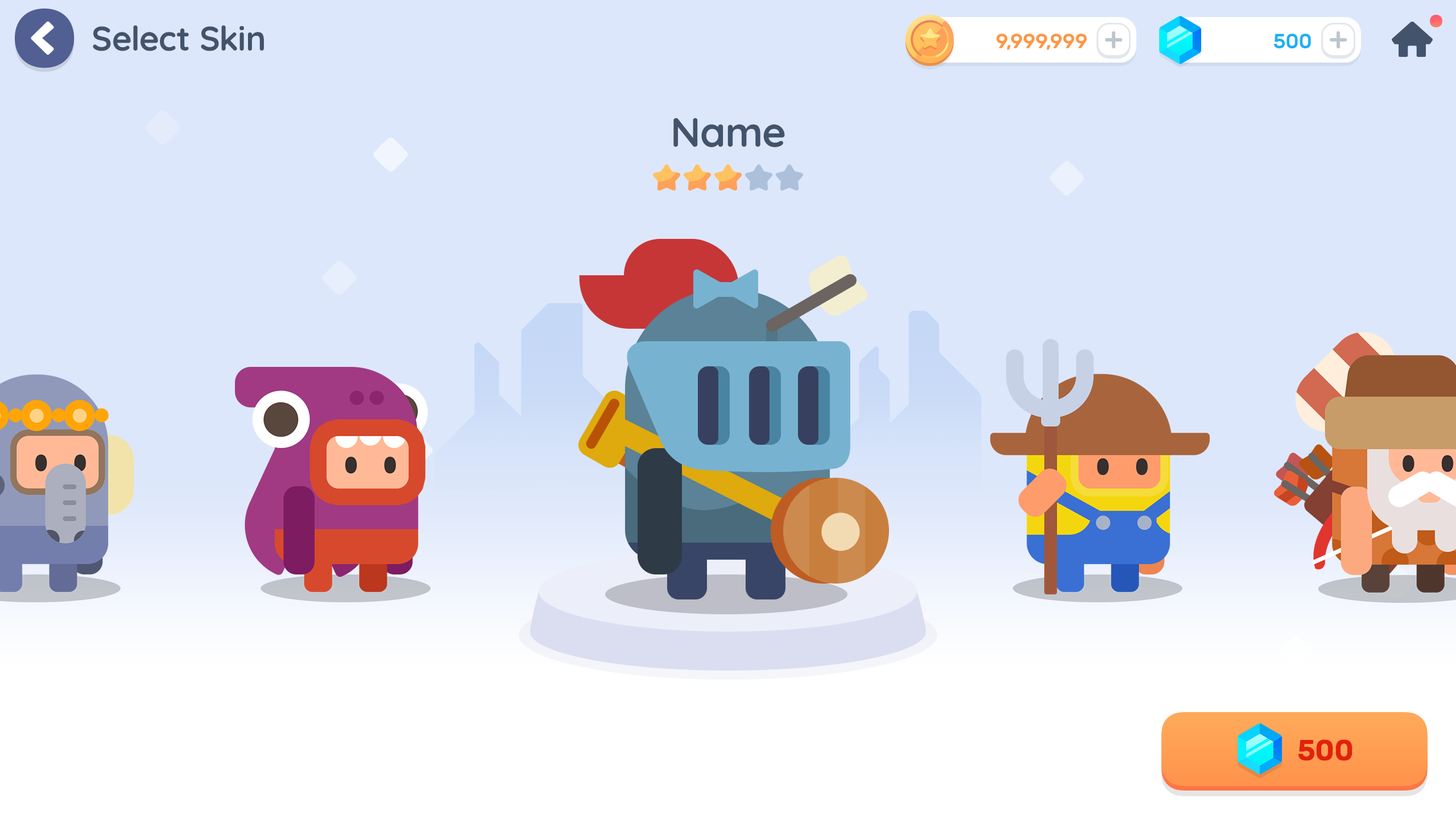
<style>
.page{position:relative;width:1456px;height:819px;background:#dde7fb}
.page>*{position:absolute;margin:0}
.t1{font:34.1px "Quicksand-Bold";letter-spacing:-0.01em;color:#43536c}
.t2{font:20.5px "Rubik-Medium";letter-spacing:-0.01em;color:#fd9744;text-transform:uppercase}
.t3{font:20.5px "Rubik-Medium";letter-spacing:-0.01em;color:#1cb0f6;text-transform:uppercase}
.t4{font:40.9px "Quicksand-Bold";letter-spacing:-0.01em;color:#43536c}
.t5{font:28.4px "Rubik-Medium";letter-spacing:-0.01em;color:#e1220c;font-weight:bold}
</style>
<div class="page">
<p class="t1" style="left:93px;top:25px;width:171px;height:26px">Select Skin</p>
<p class="t2" style="left:996px;top:34px;width:91px;height:16px">9,999,999</p>
<p class="t3" style="left:1274px;top:34px;width:37px;height:14px">500</p>
<p class="t4" style="left:673px;top:118px;width:112px;height:29px">Name</p>
<p class="t5" style="left:1298px;top:739px;width:54px;height:22px">500</p>
</div>
